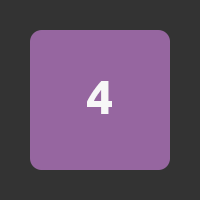
<style>
.page{position:relative;width:200px;height:200px;background:#333333}
.page>*{position:absolute;margin:0}
.t1{font:48px "Ubuntu-Bold";color:#f7f7f7}
</style>
<div class="page">
<p class="t1" style="left:87px;top:81px;width:25px;height:33px">4</p>
</div>
